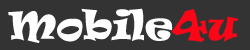
<style>
.page{position:relative;width:250px;height:50px;background:#333333}
.page>*{position:absolute;margin:0}
.t1{font:37.5px "Ravie";letter-spacing:-0.01em;color:#fefefe}
.t2{font:37.5px "Ravie";letter-spacing:-0.01em;color:#fd0416}
</style>
<div class="page">
<p class="t1" style="left:8px;top:8px;width:230px;height:35px">Mobile<span class="t2">4u</span></p>
</div>
